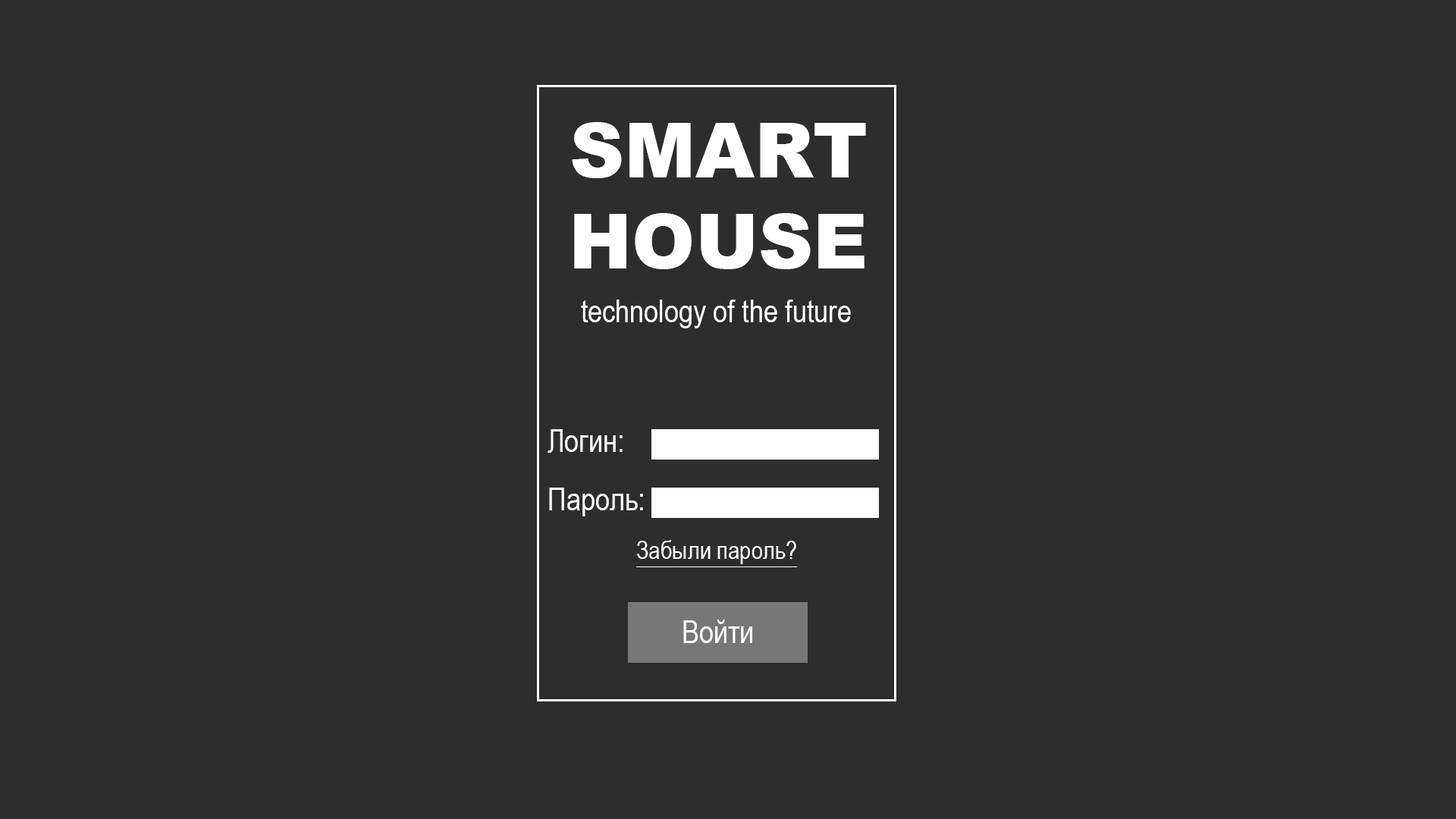
<style>
.page{position:relative;width:1456px;height:819px;background:#2d2d2d}
.page>*{position:absolute;margin:0}
.t1{font:75.8px "Arial-Black";color:#ffffff}
.t2{font:31.6px "ArialNarrow";color:#ffffff}
.t3{font:25.3px "ArialNarrow";color:#ffffff}
</style>
<div class="page">
<p class="t1" style="left:572px;top:122px;width:294px;height:147px;text-align:center">SMART<br>HOUSE</p>
<p class="t2" style="left:581px;top:300px;width:270px;height:28px">technology of the future</p>
<p class="t2" style="left:548px;top:429px;width:75px;height:24px">Логин:</p>
<p class="t2" style="left:549px;top:488px;width:94px;height:28px">Пароль:</p>
<p class="t3" style="left:637px;top:540px;width:159px;height:24px">Забыли пароль?</p>
<p class="t2" style="left:683px;top:620px;width:69px;height:23px">Войти</p>
</div>
